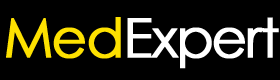
<style>
.page{position:relative;width:280px;height:80px;background:#000000}
.page>*{position:absolute;margin:0}
.t1{font:54.2px "CenturyGothic";letter-spacing:-0.05em;color:#fee100;font-weight:bold}
.t2{font:54.2px "CenturyGothic";letter-spacing:-0.05em;color:#ffffff;font-weight:bold}
</style>
<div class="page">
<p class="t1" style="left:6px;top:17px;width:115px;height:42px">Med</p>
<p class="t2" style="left:127px;top:17px;width:152px;height:52px">Expert</p>
</div>
